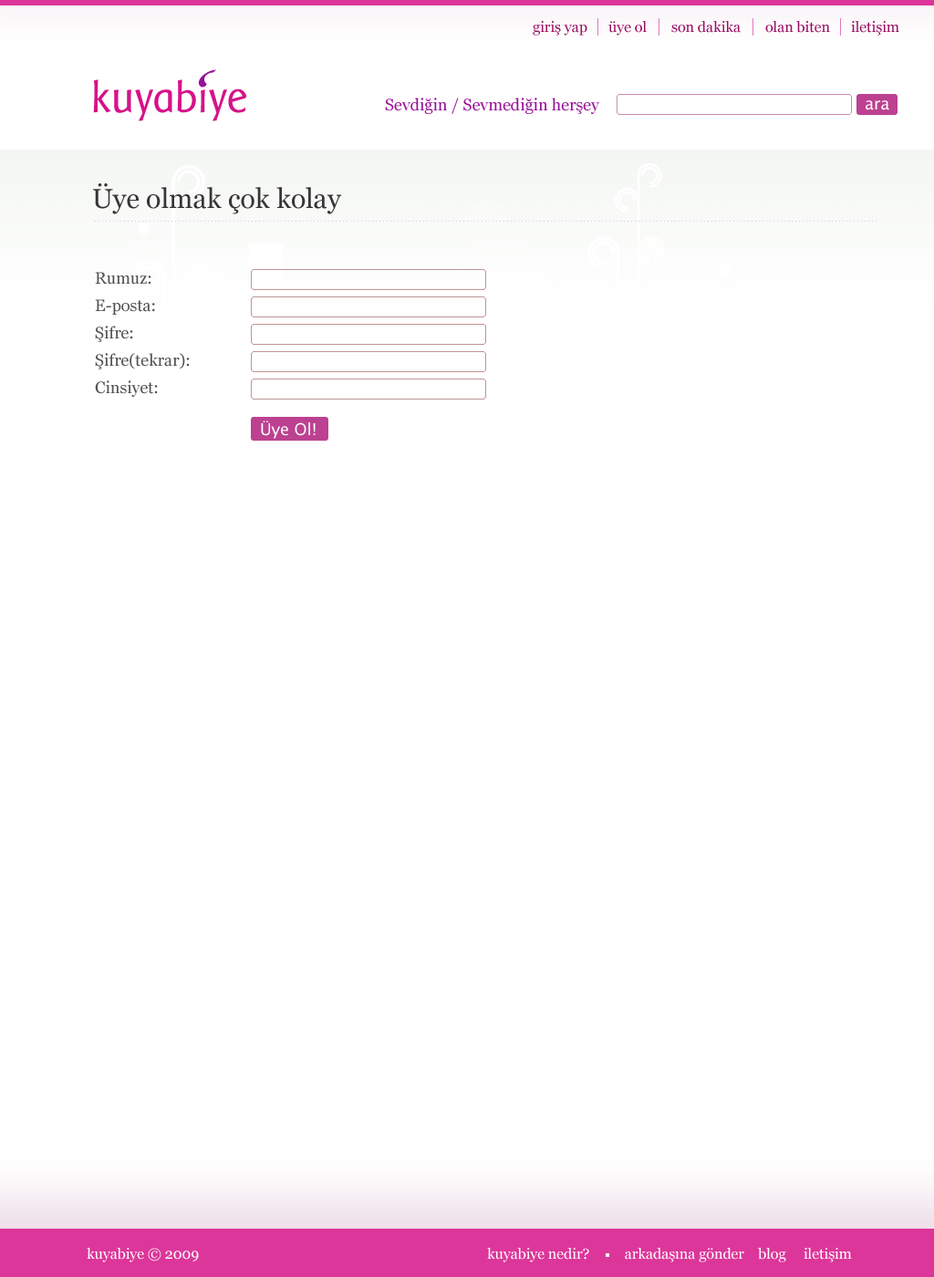
<style>
.page{position:relative;width:934px;height:1277px;background:#ffffff}
.page>*{position:absolute;margin:0}
.t1{font:14.6px "Georgia";color:#980e62}
.t2{font:44.6px "BaarSophia";color:#d51289}
.t3{font:16.4px "Georgia";color:#971298}
.t4{font:16.4px "LucidaSans";color:#ffffff}
.t5{font:27.4px "Georgia";color:#353535}
.t6{font:16.4px/27.4px "Georgia";color:#525252}
.t7{font:14.6px "Georgia";color:#ffffff}
</style>
<div class="page">
<p class="t1" style="left:533px;top:21px;width:366px;height:15px">giriş yap      üye ol       son dakika       olan biten      iletişim</p>
<p class="t2" style="left:93px;top:79px;width:154px;height:42px">kuyabiye</p>
<p class="t3" style="left:385px;top:98px;width:214px;height:16px">Sevdiğin / Sevmediğin herşey</p>
<p class="t4" style="left:866px;top:100px;width:23px;height:10px">ara</p>
<p class="t5" style="left:93px;top:183px;width:249px;height:31px">Üye olmak çok kolay</p>
<p class="t6" style="left:95px;top:272px;width:95px;height:125px">Rumuz:<br>E-posta:<br>Şifre:<br>Şifre(tekrar):<br>Cinsiyet:</p>
<p class="t4" style="left:261px;top:420px;width:55px;height:19px">Üye Ol!</p>
<p class="t7" style="left:87px;top:1248px;width:112px;height:14px">kuyabiye © 2009</p>
<p class="t7" style="left:487px;top:1248px;width:365px;height:14px">kuyabiye nedir?          arkadaşına gönder    blog     iletişim</p>
</div>
